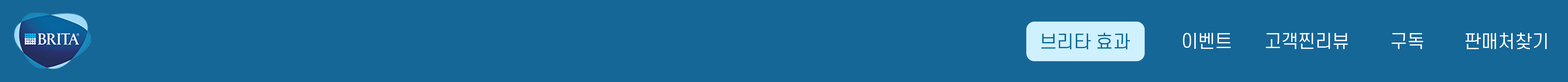
<style>
.page{position:relative;width:1568px;height:82px;background:#156798}
.page>*{position:absolute;margin:0}
.t1{font:17.7px "S-CoreDream-4Regular";color:#006797}
.t2{font:17.7px "S-CoreDream-4Regular";color:#ffffff}
</style>
<div class="page">
<p class="t1" style="left:1041px;top:33px;width:89px;height:16px">브리타 효과</p>
<p class="t2" style="left:1183px;top:33px;width:48px;height:16px">이벤트</p>
<p class="t2" style="left:1266px;top:33px;width:82px;height:16px">고객찐리뷰</p>
<p class="t2" style="left:1392px;top:33px;width:31px;height:16px">구독</p>
<p class="t2" style="left:1465px;top:32px;width:82px;height:17px">판매처찾기</p>
</div>
